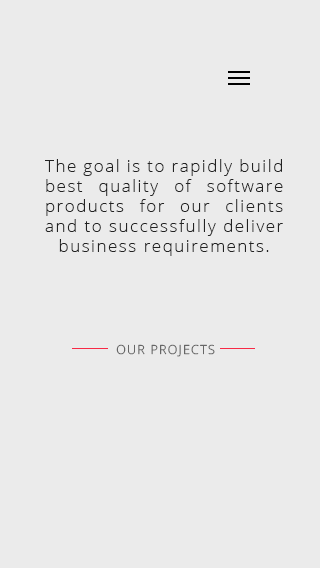
<style>
.page{position:relative;width:320px;height:568px;background:#ebebeb}
.page>*{position:absolute;margin:0}
.t1{font:16.7px "OpenSans-Light";letter-spacing:0.1em;color:#222222}
.t2{font:12.5px "OpenSans-Light";letter-spacing:0.1em;color:#666666}
</style>
<div class="page">
<p class="t1" style="left:45px;top:159px;width:238px;height:97px;text-align:justify">The goal is to rapidly build best quality of software products for our clients and to successfully deliver business requirements.</p>
<p class="t2" style="left:116px;top:344px;width:99px;height:13px">OUR PROJECTS</p>
</div>
